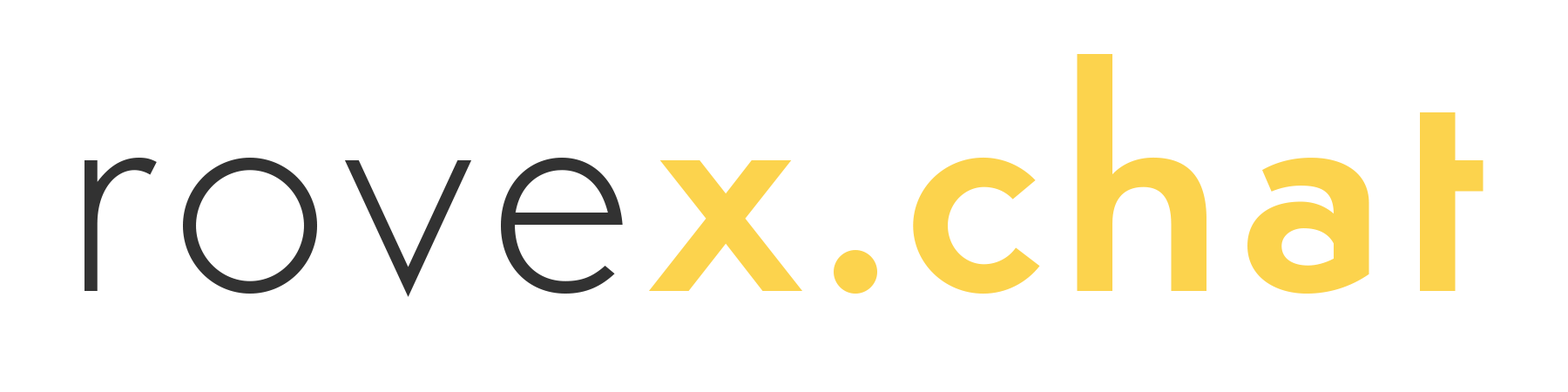
<style>
.page{position:relative;width:1568px;height:392px;background:#ffffff}
.page>*{position:absolute;margin:0}
.t1{font:316px "Simplo-Demi";letter-spacing:0.04em;color:#fcd34d}
.t2{font:316px "Simplo-Thin";letter-spacing:0.04em;color:#323232}
</style>
<div class="page">
<p class="t1" style="left:84px;top:54px;width:1400px;height:243px"><span class="t2">rove</span>x.chat</p>
</div>
